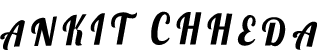
<style>
.page{position:relative;width:317px;height:50px;background:#ffffff}
.page>*{position:absolute;margin:0}
.t1{font:32.4px "Lobster-Regular";letter-spacing:0.2em;color:#000000;scale:1.11 1}
</style>
<div class="page">
<p class="t1" style="left:0px;top:11px;width:318px;height:39px">ANKIT CHHEDA</p>
</div>
